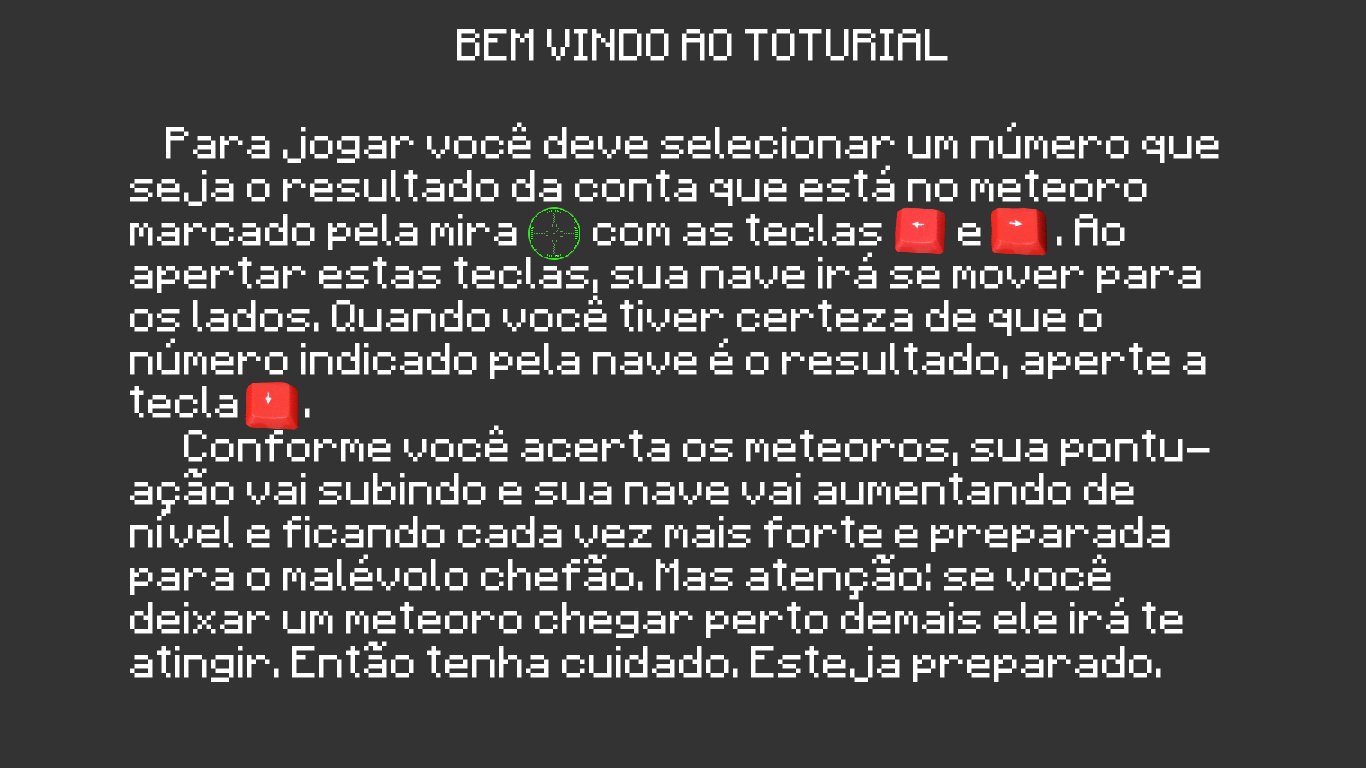
<style>
.page{position:relative;width:1366px;height:768px;background:#333333}
.page>*{position:absolute;margin:0}
.t1{font:36px "Minecraftia-Regular";color:#ffffff}
.t2{font:36px "Minecraftia-Regular";color:#fefefe}
.t3{font:36px "Minecraftia-Regular";color:#000000}
</style>
<div class="page">
<p class="t1" style="left:457px;top:29px;width:491px;height:32px">BEM VINDO AO TOTURIAL</p>
<p class="t2" style="left:130px;top:122px;width:1089px;height:560px"><span class="t3"> </span>Para jogar você deve selecionar um número que seja o resultado da conta que está no meteoro marcado pela mira        com as teclas        e        . Ao apertar estas teclas, sua nave irá se mover para os lados. Quando você tiver certeza de que o número indicado pela nave é o resultado, aperte a tecla       . <br>   Conforme você acerta os meteoros, sua pontuação vai subindo e sua nave vai aumentando de nível e ficando cada vez mais forte e preparada para o malévolo chefão. Mas atenção: se você deixar um meteoro chegar perto demais ele irá te atingir. Então tenha cuidado. Esteja preparado.</p>
</div>
